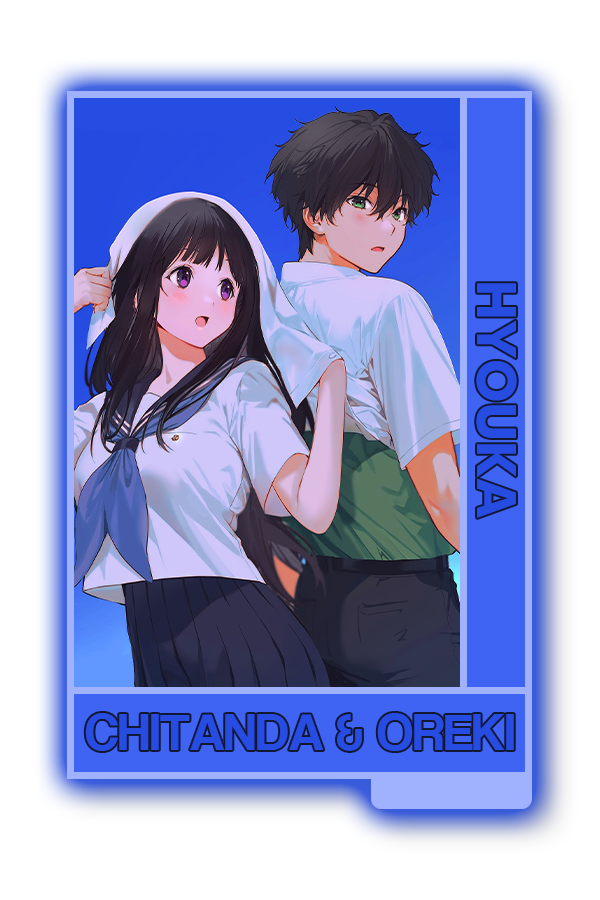
<style>
.page{position:relative;width:600px;height:900px;background:#ffffff}
.page>*{position:absolute;margin:0}
.t1{font:55.7px "MADETOMMY-Bold";color:#3758dd}
.t2{font:53.9px "CoolveticaRg-Regular";color:#3758dd}
</style>
<div class="page">
<p class="t1" style="left:476px;top:283px;width:41px;height:235px;rotate:90deg">HYOUKA</p>
<p class="t2" style="left:85px;top:713px;width:429px;height:38px">CHITANDA &amp; OREKI</p>
</div>
